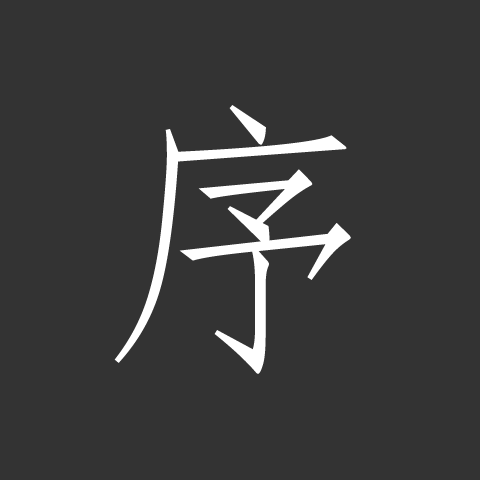
<style>
.page{position:relative;width:480px;height:480px;background:#333333}
.page>*{position:absolute;margin:0}
.t1{font:288px "STFangsong";color:#ffffff}
</style>
<div class="page">
<p class="t1" style="left:114px;top:105px;width:237px;height:269px">序</p>
</div>
